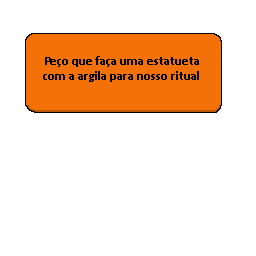
<style>
.page{position:relative;width:256px;height:256px;background:#ffffff}
.page>*{position:absolute;margin:0}
.t1{font:12.5px "Calibri-Bold";color:#000000}
</style>
<div class="page">
<p class="t1" style="left:43px;top:56px;width:156px;height:26px;text-align:center">Peço que faça uma estatueta com a argila para nosso ritual</p>
</div>
